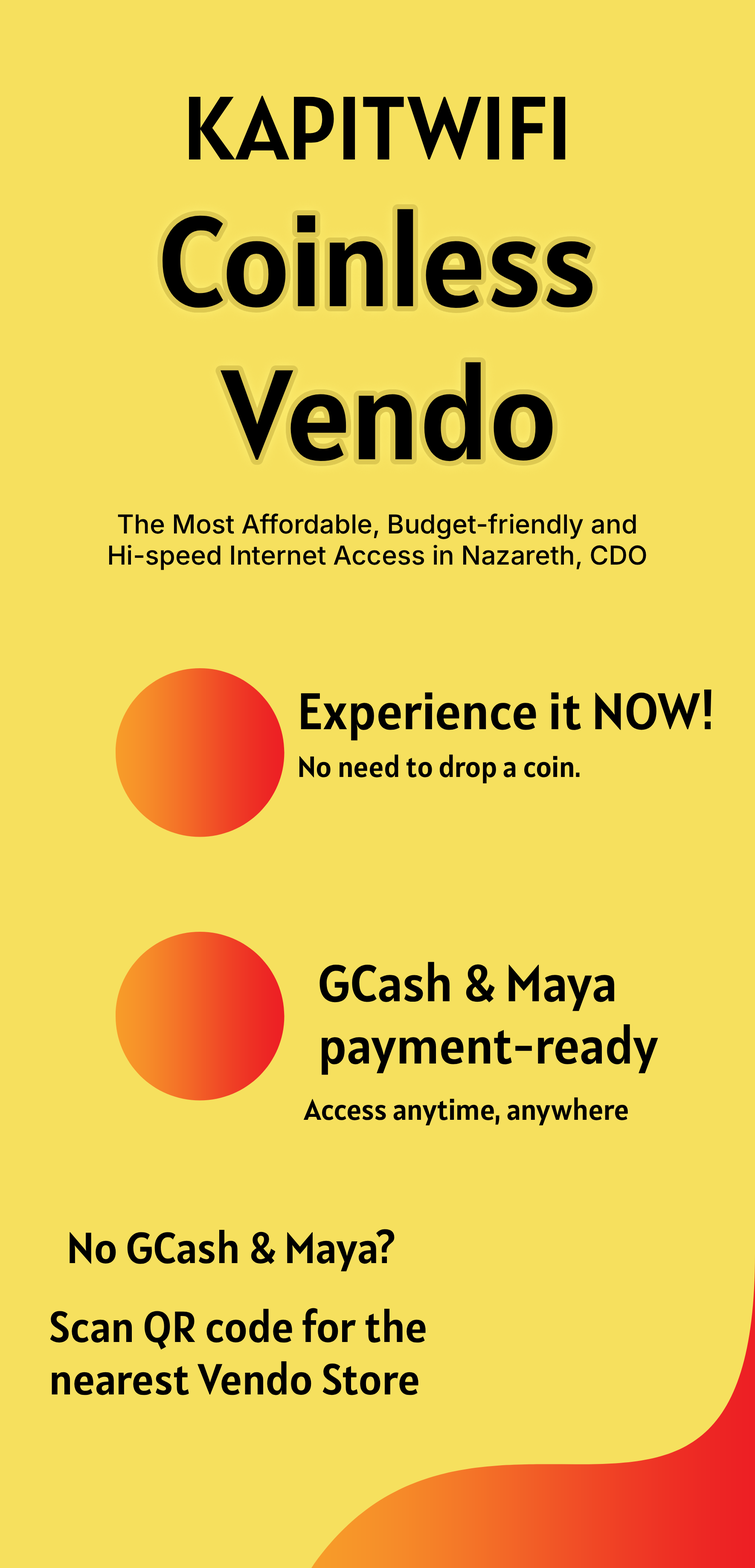
<style>
.page{position:relative;width:755px;height:1568px;background:#f6e05e}
.page>*{position:absolute;margin:0}
.t1{font:90px "Alatsi-Regular";color:#000000}
.t2{font:127.6px "Alatsi-Regular";color:#000000}
.t3{font:26.1px "Inter-Medium";color:#000000}
.t4{font:51.6px "Alatsi-Regular";color:#000000}
.t5{font:29.4px "Alatsi-Regular";color:#000000}
.t6{font:43.6px "Alatsi-Regular";color:#000000}
</style>
<div class="page">
<p class="t1" style="left:189px;top:96px;width:376px;height:64px">KAPITWIFI</p>
<p class="t2" style="left:162px;top:209px;width:430px;height:252px;text-align:center">Coinless <br>Vendo</p>
<p class="t3" style="left:109px;top:513px;width:537px;height:57px;text-align:center">The Most Affordable, Budget-friendly and<br>Hi-speed Internet Access in Nazareth, CDO</p>
<p class="t3" style="left:109px;top:513px;width:537px;height:57px;text-align:center">The Most Affordable, Budget-friendly and<br>Hi-speed Internet Access in Nazareth, CDO</p>
<p class="t4" style="left:301px;top:690px;width:410px;height:51px">Experience it NOW!</p>
<p class="t5" style="left:299px;top:754px;width:281px;height:30px">No need to drop a coin.</p>
<p class="t4" style="left:319px;top:962px;width:339px;height:113px">GCash &amp; Maya<br>payment-ready</p>
<p class="t5" style="left:303px;top:1097px;width:325px;height:29px">Access anytime, anywhere</p>
<p class="t6" style="left:70px;top:1229px;width:324px;height:43px">No GCash &amp; Maya?</p>
<p class="t6" style="left:50px;top:1308px;width:376px;height:87px">Scan QR code for the<br>nearest Vendo Store</p>
</div>
